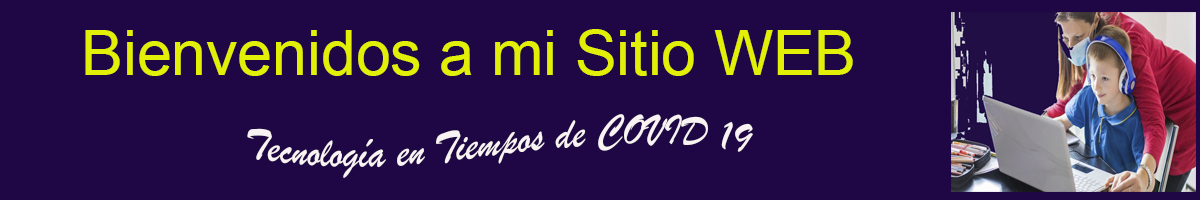
<style>
.page{position:relative;width:1200px;height:200px;background:#1f0644}
.page>*{position:absolute;margin:0}
.t1{font:62.6px "ArialMT";color:#e2f007}
.t2{font:45.4px "BrushScriptMT";color:#f9f3f3;scale:0.92 1}
</style>
<div class="page">
<p class="t1" style="left:85px;top:29px;width:768px;height:47px">Bienvenidos a mi Sitio WEB</p>
<p class="t2" style="left:247px;top:114px;width:506px;height:64px">Tecnología en Tiempos de COVID 19</p>
</div>
